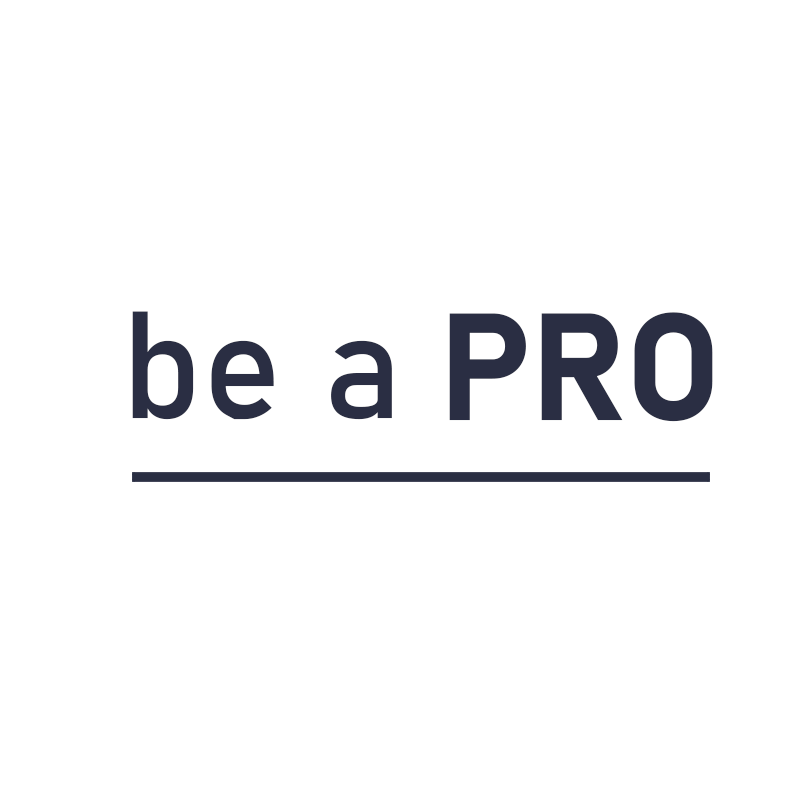
<style>
.page{position:relative;width:800px;height:800px;background:#ffffff}
.page>*{position:absolute;margin:0}
.t1{font:150px "Bahnschrift";color:#2a2e43;font-style:italic}
.t2{font:150px "Bahnschrift-Bold";color:#2a2e43;font-style:italic}
</style>
<div class="page">
<p class="t1" style="left:132px;top:311px;width:260px;height:109px">be a</p>
<p class="t2" style="left:449px;top:312px;width:264px;height:110px">PRO</p>
</div>
